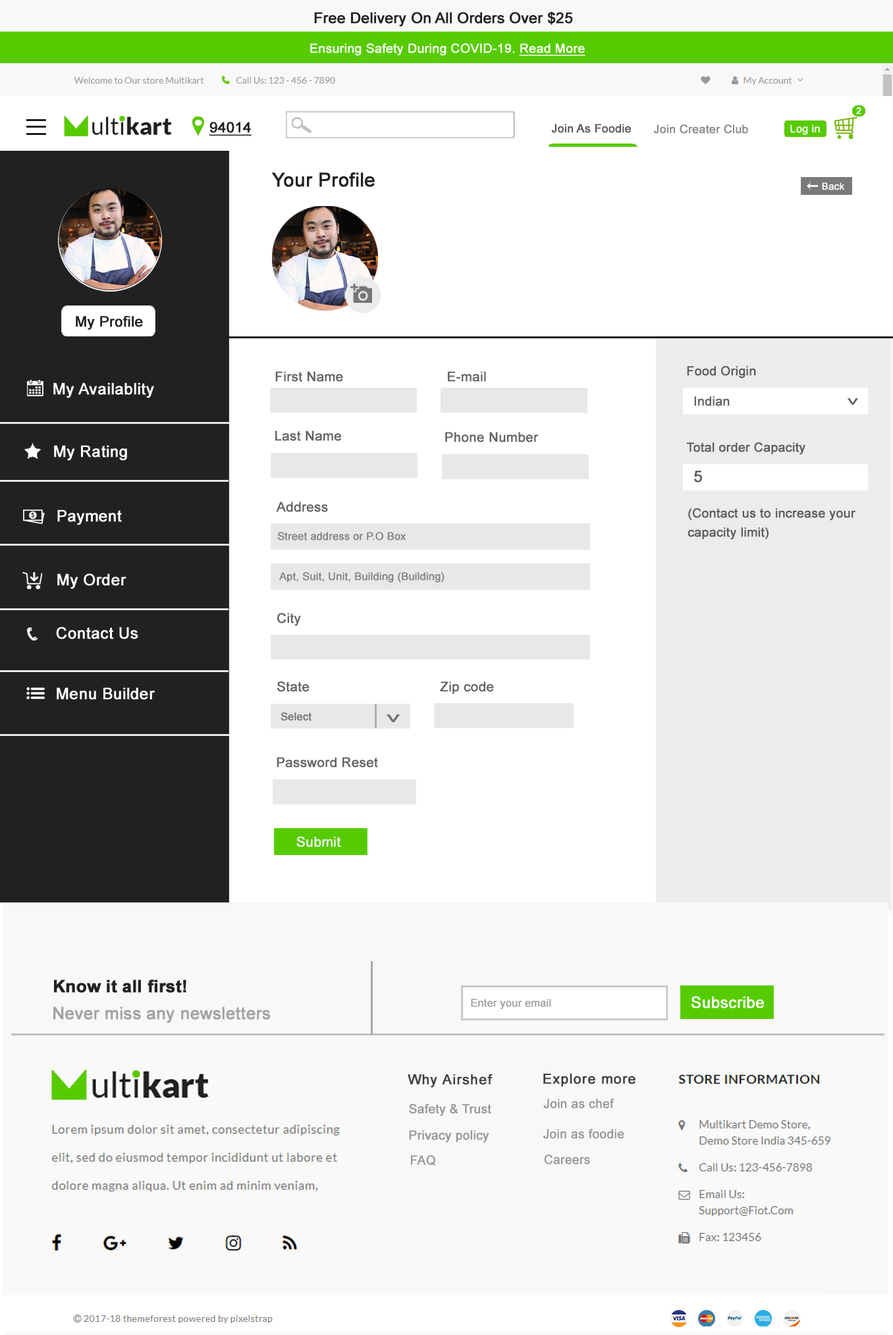
<style>
.page{position:relative;width:893px;height:1335px;background:#ffffff}
.page>*{position:absolute;margin:0}
.t1{font:14.8px "ArialMT";color:#222222;font-weight:bold}
.t2{font:12.6px "ArialMT";color:#ffffff;font-weight:bold}
.t3{font:12.6px "ArialMT";color:#ffffff;font-weight:bold;text-decoration:underline}
.t4{font:9.4px "ArialMT";color:#ffffff;font-weight:bold}
.t5{font:14.4px "ArialMT";color:#222222;font-weight:bold;text-decoration:underline}
.t6{font:11.5px "ArialMT";color:#585757;font-weight:bold}
.t7{font:11.5px "ArialMT";color:#8a8888;font-weight:bold}
.t8{font:10.6px "ArialMT";color:#ffffff;font-weight:bold}
.t9{font:19px "ArialMT";color:#212121;font-weight:bold}
.t10{font:9.8px "ArialMT";color:#ffffff;font-weight:bold}
.t11{font:14.5px "ArialMT";color:#212121;font-weight:bold}
.t12{font:13.3px "ArialMT";color:#636363;font-weight:bold}
.t13{font:12.6px "ArialMT";color:#5e5e5e;font-weight:bold}
.t14{font:15.9px "ArialMT";color:#ffffff;font-weight:bold}
.t15{font:12.6px "ArialMT";color:#636363;font-weight:bold}
.t16{font:21.2px "ArialMT";color:#636363;font-weight:bold;scale:0.61 1}
.t17{font:15.8px "ArialMT";color:#636363;font-weight:bold}
.t18{font:10.5px "ArialMT";color:#848484;font-weight:bold}
.t19{font:10.5px "ArialMT";color:#717171;font-weight:bold}
.t20{font:25.7px "ArialMT";color:#717171;font-weight:bold;scale:0.59 1}
.t21{font:13.6px "ArialMT";color:#ececec;font-weight:bold}
.t22{font:16.9px "Arial-BoldMT";color:#222222;font-weight:bold}
.t23{font:10.5px "ArialMT";color:#a3a2a2;font-weight:bold}
.t24{font:15.8px "ArialMT";color:#ffffff;font-weight:bold}
.t25{font:16.9px "ArialMT";color:#a3a2a2;font-weight:bold}
.t26{font:13.7px "ArialMT";letter-spacing:0.05em;color:#414141;font-weight:bold}
.t27{font:13.7px "ArialMT";letter-spacing:0.05em;color:#3e3e3e;font-weight:bold}
.t28{font:12.4px "ArialMT";color:#979696;font-weight:bold}
.t29{font:12.4px "ArialMT";color:#989797;font-weight:bold}
</style>
<div class="page">
<p class="t1" style="left:314px;top:12px;width:259px;height:14px">Free Delivery On All Orders Over $25</p>
<p class="t2" style="left:310px;top:43px;width:275px;height:13px">Ensuring Safety During COVID-19. <span class="t3">Read More</span></p>
<p class="t4" style="left:856px;top:107px;width:5px;height:8px">2</p>
<p class="t5" style="left:209px;top:122px;width:43px;height:14px">94014</p>
<p class="t6" style="left:551px;top:124px;width:80px;height:9px">Join As Foodie</p>
<p class="t7" style="left:653px;top:124px;width:95px;height:10px">Join Creater Club</p>
<p class="t8" style="left:790px;top:124px;width:30px;height:11px">Log in</p>
<p class="t9" style="left:272px;top:173px;width:103px;height:14px">Your Profile</p>
<p class="t10" style="left:822px;top:182px;width:23px;height:8px">Back</p>
<p class="t11" style="left:76px;top:316px;width:67px;height:14px">My Profile</p>
<p class="t12" style="left:275px;top:371px;width:68px;height:11px">First Name</p>
<p class="t12" style="left:448px;top:371px;width:38px;height:11px">E-mail</p>
<p class="t13" style="left:687px;top:366px;width:69px;height:13px">Food Origin</p>
<p class="t14" style="left:53px;top:383px;width:101px;height:15px">My Availablity</p>
<p class="t15" style="left:694px;top:396px;width:36px;height:10px">Indian</p>
<p class="t16" style="left:847px;top:398px;width:11px;height:7px;rotate:90deg">&gt;</p>
<p class="t12" style="left:275px;top:431px;width:66px;height:10px">Last Name</p>
<p class="t12" style="left:445px;top:432px;width:94px;height:11px">Phone Number</p>
<p class="t14" style="left:54px;top:445px;width:73px;height:16px">My Rating</p>
<p class="t13" style="left:686px;top:443px;width:119px;height:12px">Total order Capacity</p>
<p class="t17" style="left:694px;top:471px;width:8px;height:12px">5</p>
<p class="t14" style="left:57px;top:510px;width:65px;height:15px">Payment</p>
<p class="t12" style="left:276px;top:502px;width:52px;height:10px">Address</p>
<p class="t13" style="left:687px;top:508px;width:168px;height:32px">(Contact us to increase your <br>capacity limit)</p>
<p class="t18" style="left:277px;top:532px;width:129px;height:9px">Street address or P.O Box</p>
<p class="t14" style="left:57px;top:574px;width:69px;height:15px">My Order</p>
<p class="t18" style="left:279px;top:572px;width:165px;height:11px">Apt, Suit, Unit, Building (Building)</p>
<p class="t12" style="left:277px;top:613px;width:24px;height:13px">City</p>
<p class="t14" style="left:56px;top:627px;width:82px;height:12px">Contact Us</p>
<p class="t14" style="left:57px;top:687px;width:98px;height:13px">Menu Builder</p>
<p class="t12" style="left:277px;top:682px;width:32px;height:10px">State</p>
<p class="t12" style="left:440px;top:682px;width:54px;height:13px">Zip code</p>
<p class="t19" style="left:281px;top:712px;width:30px;height:9px">Select</p>
<p class="t20" style="left:387px;top:714px;width:13px;height:8px;rotate:90deg">&gt;</p>
<p class="t12" style="left:277px;top:757px;width:101px;height:11px">Password Reset</p>
<p class="t21" style="left:296px;top:836px;width:45px;height:11px">Submit</p>
<p class="t22" style="left:54px;top:980px;width:132px;height:13px">Know it all first!</p>
<p class="t23" style="left:471px;top:999px;width:80px;height:10px">Enter your email</p>
<p class="t24" style="left:691px;top:996px;width:73px;height:13px">Subscribe</p>
<p class="t25" style="left:53px;top:1007px;width:218px;height:16px">Never miss any newsletters</p>
<p class="t26" style="left:408px;top:1074px;width:85px;height:14px">Why Airshef</p>
<p class="t27" style="left:543px;top:1074px;width:92px;height:13px">Explore more</p>
<p class="t28" style="left:409px;top:1104px;width:82px;height:13px">Safety &amp; Trust</p>
<p class="t29" style="left:543px;top:1099px;width:71px;height:10px">Join as chef</p>
<p class="t28" style="left:409px;top:1131px;width:80px;height:12px">Privacy policy</p>
<p class="t29" style="left:543px;top:1129px;width:81px;height:10px">Join as foodie</p>
<p class="t28" style="left:411px;top:1156px;width:24px;height:10px">FAQ</p>
<p class="t29" style="left:544px;top:1155px;width:46px;height:10px">Careers</p>
</div>
